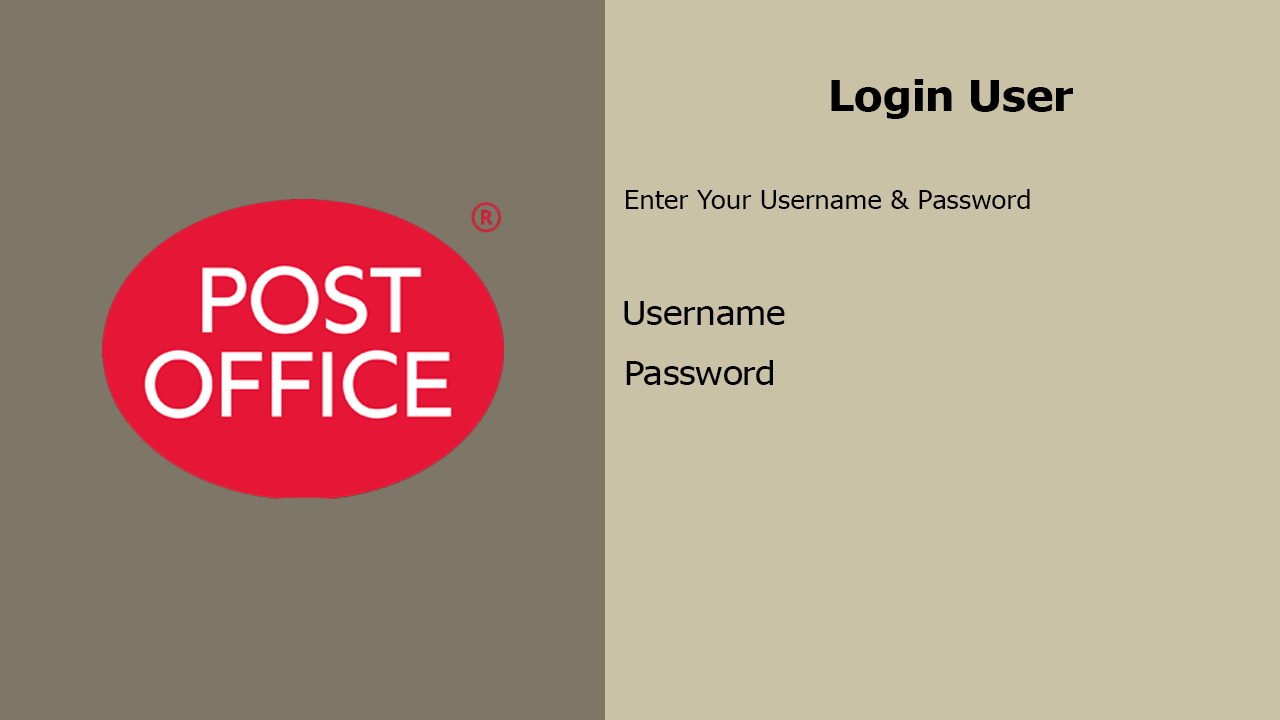
<style>
.page{position:relative;width:1280px;height:720px;background:#cac2a6}
.page>*{position:absolute;margin:0}
.t1{font:41.7px "Tahoma-Bold";color:#000000;scale:1.1 1}
.t2{font:25px "Tahoma";color:#000000;scale:1.1 1}
.t3{font:33.3px "Tahoma";color:#000000;scale:1.1 1}
</style>
<div class="page">
<p class="t1" style="left:831px;top:79px;width:242px;height:40px">Login User</p>
<p class="t2" style="left:626px;top:189px;width:404px;height:20px">Enter Your Username &amp; Password</p>
<p class="t3" style="left:624px;top:301px;width:161px;height:24px">Username</p>
<p class="t3" style="left:626px;top:360px;width:147px;height:25px">Password</p>
</div>
